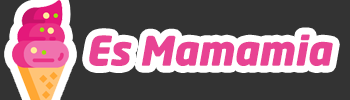
<style>
.page{position:relative;width:350px;height:100px;background:#333333}
.page>*{position:absolute;margin:0}
.t1{font:40px "NeoSans-BlackItalic";color:#e84393}
</style>
<div class="page">
<p class="t1" style="left:89px;top:34px;width:244px;height:32px">Es Mamamia</p>
</div>
